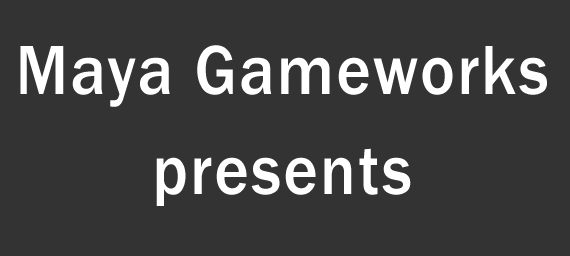
<style>
.page{position:relative;width:570px;height:256px;background:#333333}
.page>*{position:absolute;margin:0}
.t1{font:72px/100px "FranklinGothic-Medium";letter-spacing:0.04em;color:#ffffff;scale:0.91 1}
</style>
<div class="page">
<p class="t1" style="left:20px;top:45px;width:527px;height:161px;text-align:center">Maya Gameworks<br>presents</p>
</div>
